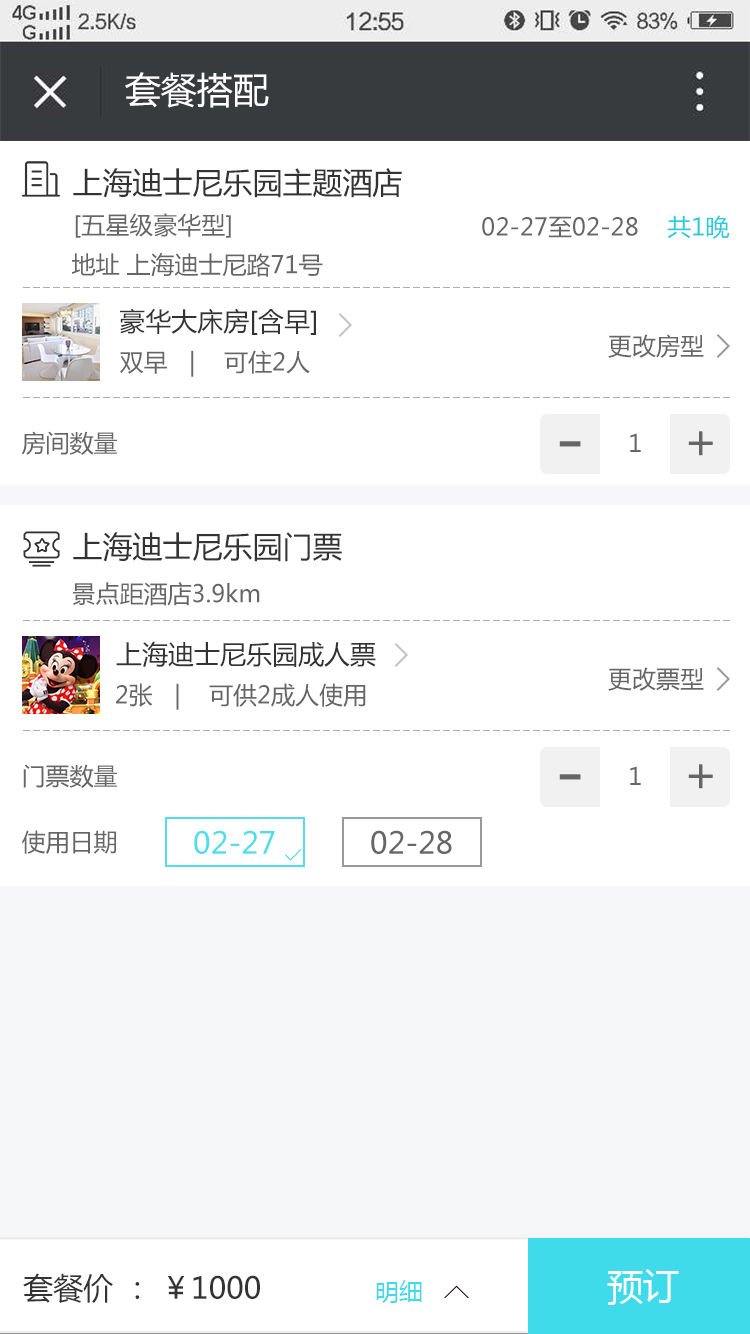
<style>
.page{position:relative;width:750px;height:1334px;background:#ffffff}
.page>*{position:absolute;margin:0}
.t1{font:36px "MicrosoftYaHei";color:#ffffff}
.t2{font:30px "MicrosoftYaHei";color:#333333}
.t3{font:24px "MicrosoftYaHei";color:#666666}
.t4{font:24px "MicrosoftYaHei";color:#28cbdb}
.t5{font:26px "MicrosoftYaHei";color:#333333}
.t6{font:48px "MicrosoftYaHei";color:#666666}
.t7{font:72px "MicrosoftYaHei";color:#666666}
.t8{font:30px "MicrosoftYaHei";color:#53dcea}
.t9{font:30px "MicrosoftYaHei";color:#666666}
.t10{font:24px "MicrosoftYaHei";color:#3fdbea}
</style>
<div class="page">
<p class="t1" style="left:125px;top:72px;width:144px;height:36px">套餐搭配</p>
<p class="t2" style="left:73px;top:168px;width:329px;height:30px">上海迪士尼乐园主题酒店</p>
<p class="t3" style="left:75px;top:213px;width:156px;height:25px">[五星级豪华型]</p>
<p class="t3" style="left:482px;top:215px;width:248px;height:24px">02-27至02-28<span class="t4">    共1晚</span></p>
<p class="t3" style="left:71px;top:253px;width:252px;height:24px">地址 上海迪士尼路71号</p>
<p class="t5" style="left:120px;top:308px;width:196px;height:27px">豪华大床房[含早]</p>
<p class="t3" style="left:608px;top:334px;width:96px;height:24px">更改房型</p>
<p class="t3" style="left:120px;top:350px;width:190px;height:27px">双早   |    可住2人</p>
<p class="t3" style="left:21px;top:431px;width:96px;height:24px">房间数量</p>
<p class="t3" style="left:630px;top:433px;width:11px;height:19px">1</p>
<p class="t6" style="left:688px;top:431px;width:25px;height:25px">+</p>
<p class="t7" style="left:559px;top:441px;width:22px;height:6px">-</p>
<p class="t2" style="left:73px;top:532px;width:269px;height:30px">上海迪士尼乐园门票</p>
<p class="t3" style="left:73px;top:582px;width:187px;height:24px">景点距酒店3.9km</p>
<p class="t5" style="left:116px;top:641px;width:260px;height:26px">上海迪士尼乐园成人票</p>
<p class="t3" style="left:608px;top:667px;width:96px;height:24px">更改票型</p>
<p class="t3" style="left:116px;top:683px;width:250px;height:27px">2张   |    可供2成人使用</p>
<p class="t3" style="left:23px;top:764px;width:94px;height:24px">门票数量</p>
<p class="t7" style="left:559px;top:774px;width:22px;height:6px">-</p>
<p class="t3" style="left:630px;top:766px;width:11px;height:19px">1</p>
<p class="t6" style="left:688px;top:764px;width:25px;height:25px">+</p>
<p class="t3" style="left:22px;top:830px;width:94px;height:24px">使用日期</p>
<p class="t8" style="left:194px;top:830px;width:81px;height:24px">02-27</p>
<p class="t9" style="left:371px;top:830px;width:81px;height:24px">02-28</p>
<p class="t2" style="left:23px;top:1273px;width:237px;height:30px">套餐价 ： ￥1000</p>
<p class="t1" style="left:607px;top:1269px;width:72px;height:36px">预订</p>
<p class="t10" style="left:376px;top:1280px;width:46px;height:23px">明细</p>
</div>
